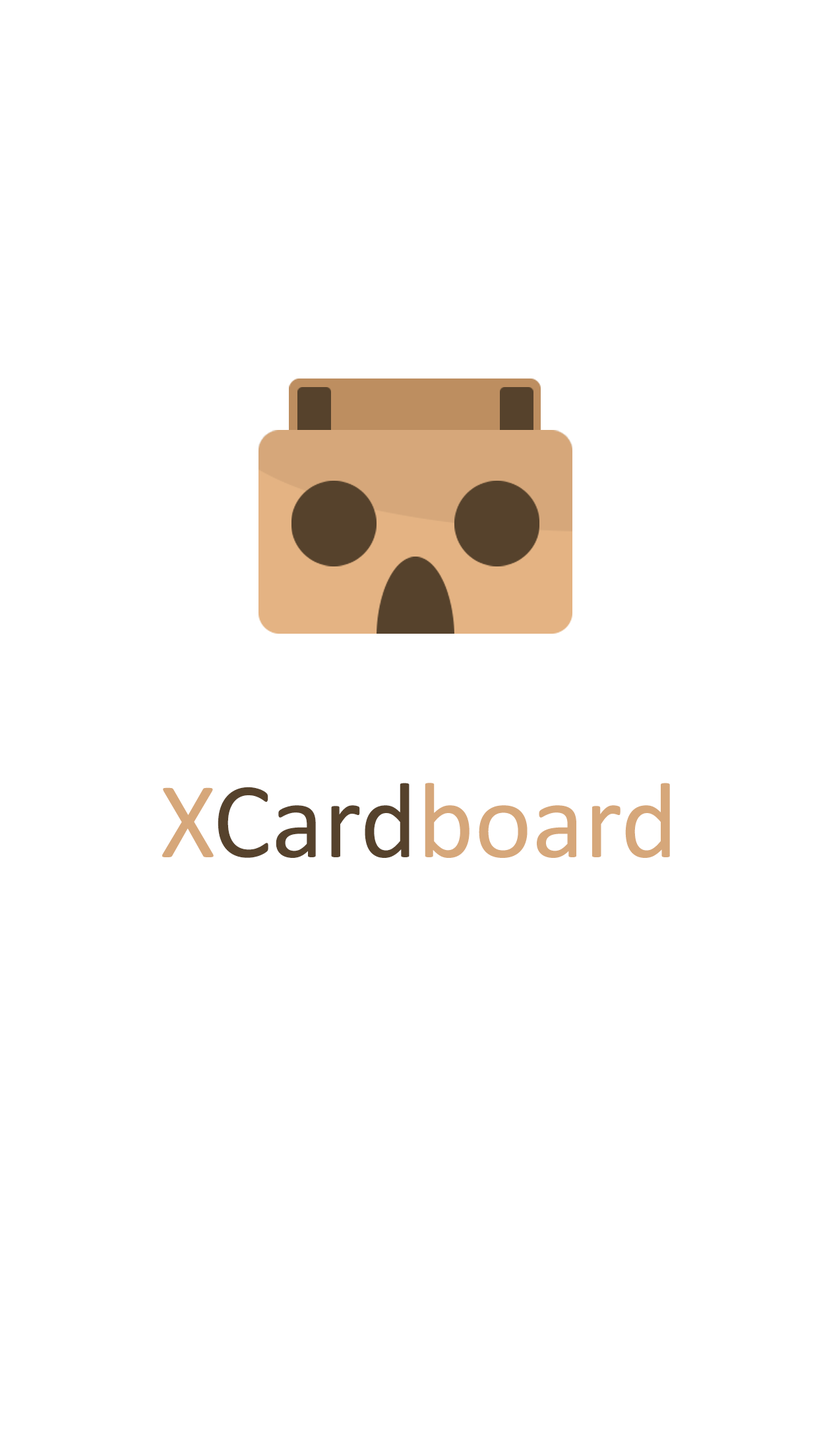
<style>
.page{position:relative;width:819px;height:1456px;background:#ffffff}
.page>*{position:absolute;margin:0}
.t1{font:108.6px "Calibri";color:#d6a77a}
.t2{font:108.6px "Calibri";color:#56422c}
</style>
<div class="page">
<p class="t1" style="left:162px;top:783px;width:508px;height:75px">X<span class="t2">Card</span>board</p>
</div>
